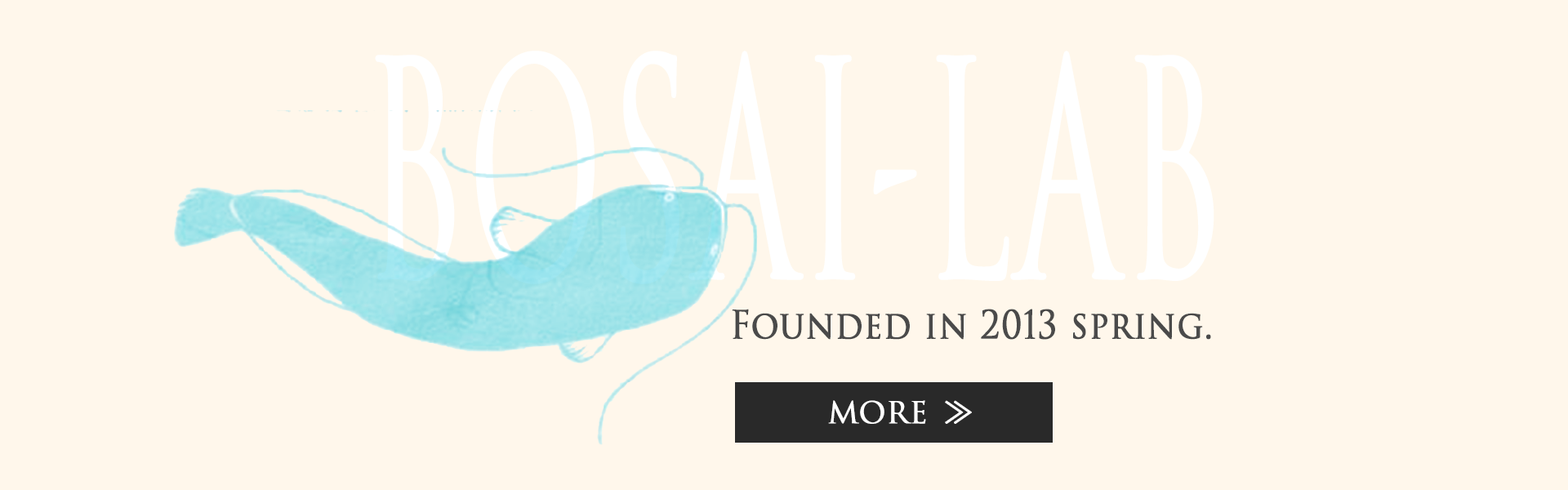
<style>
.page{position:relative;width:1568px;height:490px;background:#fff7eb}
.page>*{position:absolute;margin:0}
.t1{font:294px "TrajanPro3-Regular";color:#ffffff;font-weight:bold;scale:0.5 1}
.t2{font:37.7px "TrajanPro3-Regular";color:#4a4a4a;font-weight:bold;scale:0.91 1}
.t3{font:29.4px "TrajanPro3-Regular";color:#ffffff;font-weight:bold}
.t4{font:29.4px "KozGoPr6N-Regular";color:#ffffff;font-weight:bold}
</style>
<div class="page">
<p class="t1" style="left:375px;top:51px;width:839px;height:233px">BOSAI-LAB</p>
<p class="t2" style="left:732px;top:309px;width:479px;height:31px">Founded in 2013 spring.</p>
<p class="t3" style="left:828px;top:400px;width:144px;height:24px">MORE<span class="t4">  ≫</span></p>
</div>
